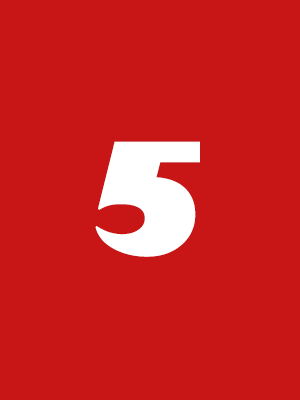
<style>
.page{position:relative;width:300px;height:400px;background:#c81616}
.page>*{position:absolute;margin:0}
.t1{font:151.2px "GillSans-UltraBold";color:#ffffff}
</style>
<div class="page">
<p class="t1" style="left:95px;top:141px;width:105px;height:116px">5</p>
</div>
